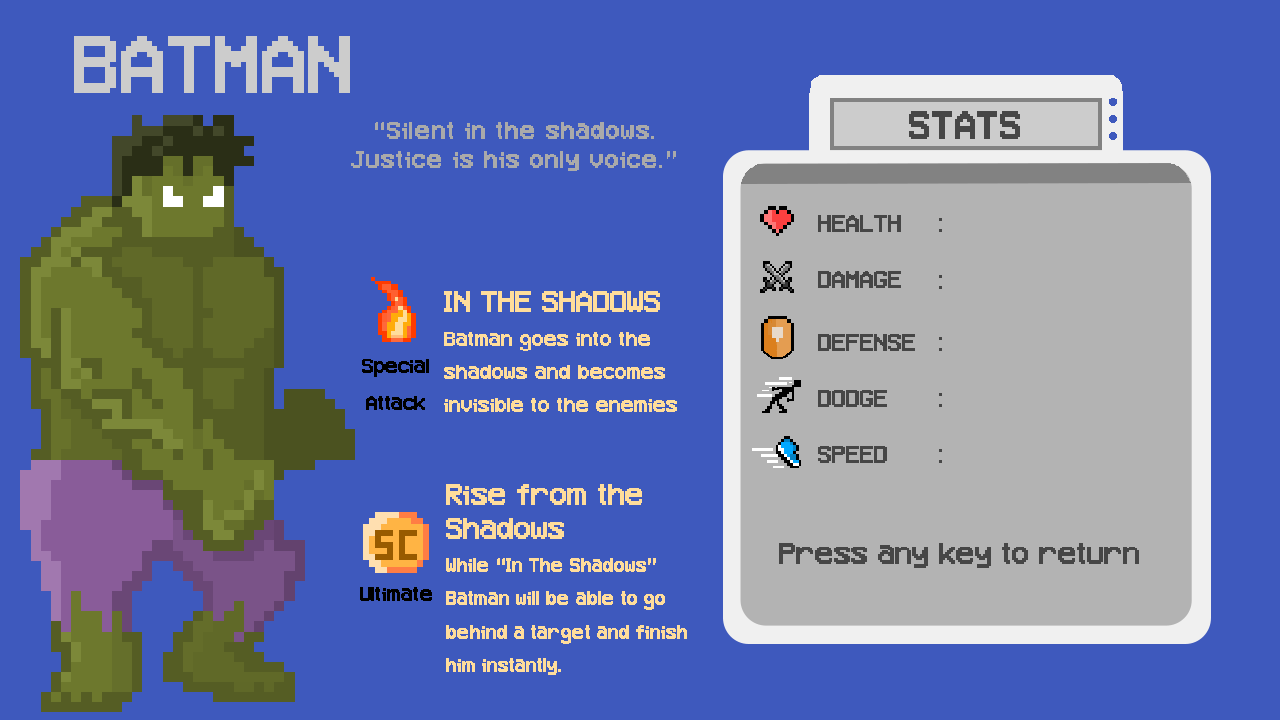
<style>
.page{position:relative;width:1280px;height:720px;background:#3e59bd}
.page>*{position:absolute;margin:0}
.t1{font:83.3px "VCRosdNEUE";color:#cccccc}
.t2{font:40.1px "VCRosdNEUE";color:#464646}
.t3{font:25px/29.2px "VCRosdNEUE";letter-spacing:0.04em;color:#aaaaaa}
.t4{font:25px "VCRosdNEUE";color:#464646}
.t5{font:20.8px/33.3px "VCRosdNEUE";color:#ffdd9b}
.t6{font:30.8px/54.2px "VCRosdNEUE";color:#ffdd9b}
.t7{font:20.8px/36.6px "VCRosdNEUE";color:#000000}
.t8{font:20px/33.3px "VCRosdNEUE";color:#ffdd9b}
.t9{font:30.8px/33.3px "VCRosdNEUE";color:#ffdd9b}
.t10{font:30.8px "VCRosdNEUE";color:#464646}
.t11{font:20.8px "VCRosdNEUE";color:#000000}
</style>
<div class="page">
<p class="t1" style="left:74px;top:36px;width:276px;height:57px">BATMAN</p>
<p class="t2" style="left:909px;top:111px;width:111px;height:28px">STATS</p>
<p class="t3" style="left:351px;top:122px;width:325px;height:49px;text-align:center">“Silent in the shadows. <br>Justice is his only voice.”</p>
<p class="t4" style="left:818px;top:215px;width:83px;height:17px">HEALTH</p>
<p class="t4" style="left:939px;top:218px;width:3px;height:14px">:</p>
<p class="t4" style="left:818px;top:271px;width:83px;height:17px">DAMAGE</p>
<p class="t4" style="left:939px;top:275px;width:3px;height:14px">:</p>
<p class="t5" style="left:444px;top:291px;width:233px;height:121px"><span class="t6">IN THE SHADOWS<br></span>Batman goes into the shadows and becomes invisible to the enemies for one turn.</p>
<p class="t4" style="left:818px;top:334px;width:97px;height:17px">DEFENSE</p>
<p class="t4" style="left:939px;top:337px;width:3px;height:14px">:</p>
<p class="t7" style="left:362px;top:359px;width:67px;height:51px;text-align:center">Special Attack</p>
<p class="t4" style="left:818px;top:390px;width:69px;height:17px">DODGE</p>
<p class="t4" style="left:939px;top:393px;width:3px;height:14px">:</p>
<p class="t4" style="left:818px;top:446px;width:69px;height:17px">SPEED</p>
<p class="t4" style="left:939px;top:449px;width:3px;height:14px">:</p>
<p class="t8" style="left:446px;top:484px;width:241px;height:191px"><span class="t9">Rise from the Shadows<br></span>While “In The Shadows” Batman will be able to go behind a target and finish him instantly.</p>
<p class="t10" style="left:779px;top:543px;width:360px;height:25px">Press any key to return</p>
<p class="t11" style="left:360px;top:587px;width:72px;height:14px">Ultimate</p>
</div>
